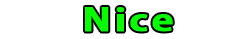
<style>
.page{position:relative;width:250px;height:39px;background:#ffffff}
.page>*{position:absolute;margin:0}
.t1{font:30.4px "AdobeGothicStd-Bold";letter-spacing:0.075em;color:#06ff00;font-weight:bold;scale:1.29 1}
</style>
<div class="page">
<p class="t1" style="left:85px;top:7px;width:88px;height:25px">Nice</p>
</div>
